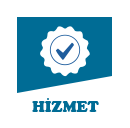
<style>
.page{position:relative;width:130px;height:128px;background:#ffffff}
.page>*{position:absolute;margin:0}
.t1{font:16px "CooperBlack";color:#006c95}
</style>
<div class="page">
<p class="t1" style="left:32px;top:101px;width:67px;height:11px">HIZMET</p>
</div>
